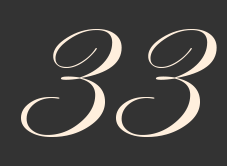
<style>
.page{position:relative;width:227px;height:166px;background:#333333}
.page>*{position:absolute;margin:0}
.t1{font:200px "EdwardianScriptITC";color:#ffefdd}
</style>
<div class="page">
<p class="t1" style="left:21px;top:29px;width:196px;height:108px">33</p>
</div>
